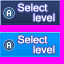
<style>
.page{position:relative;width:64px;height:64px;background:#ff00ff}
.page>*{position:absolute;margin:0}
.t1{font:17px/10px "Kartika";color:#ffffff}
</style>
<div class="page">
<p class="t1" style="left:17px;top:3px;width:38px;height:19px">Select<br>  level</p>
<p class="t1" style="left:17px;top:35px;width:38px;height:19px">Select<br>  level</p>
</div>
